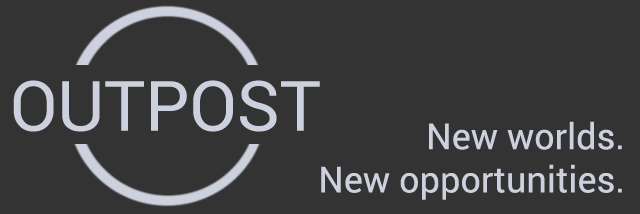
<style>
.page{position:relative;width:640px;height:214px;background:#333333}
.page>*{position:absolute;margin:0}
.t1{font:69.4px "Roboto-Regular";color:#ccd1dd}
.t2{font:36px "Roboto-Regular";color:#ccd1dd}
</style>
<div class="page">
<p class="t1" style="left:13px;top:80px;width:307px;height:52px">OUTPOST</p>
<p class="t2" style="left:321px;top:121px;width:301px;height:79px;text-align:right">New worlds. <br>New opportunities.</p>
</div>
